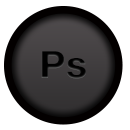
<style>
.page{position:relative;width:130px;height:130px;background:#ffffff}
.page>*{position:absolute;margin:0}
.t1{font:37.5px "HelveticaNeue-Bold";color:#111111;scale:1.06 1}
</style>
<div class="page">
<p class="t1" style="left:41px;top:51px;width:45px;height:28px">Ps</p>
</div>
